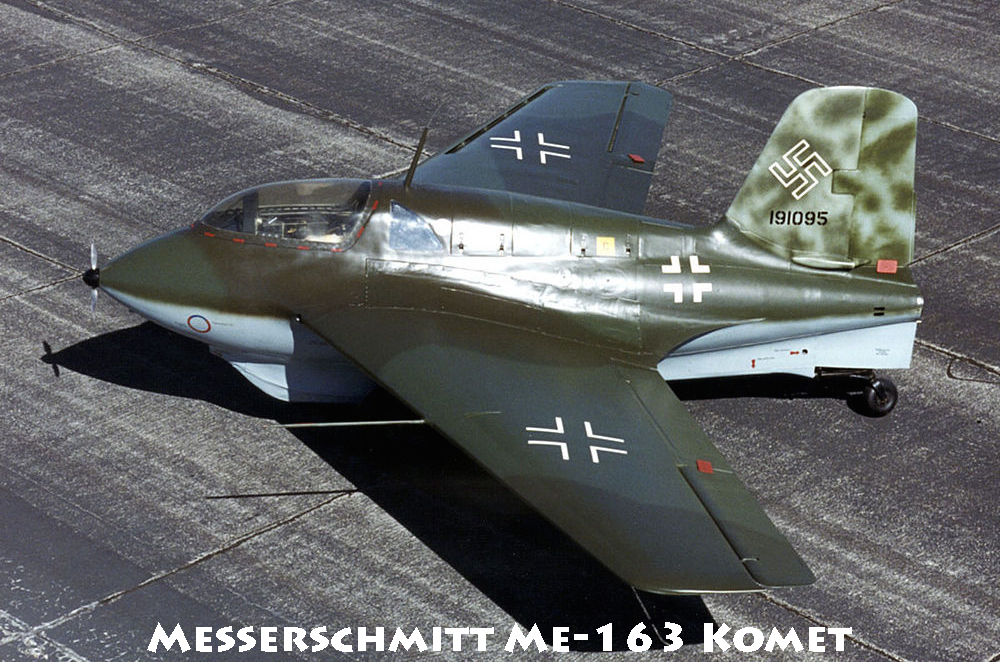
<style>
.page{position:relative;width:1000px;height:662px}
.page>*{position:absolute;margin:0}
.t1{font:39.6px "LithosPro-Black";color:#ffffff;scale:1.03 1}
</style>
<div class="page">
<p class="t1" style="left:147px;top:622px;width:705px;height:31px">Messerschmitt Me-163 Komet</p>
</div>
